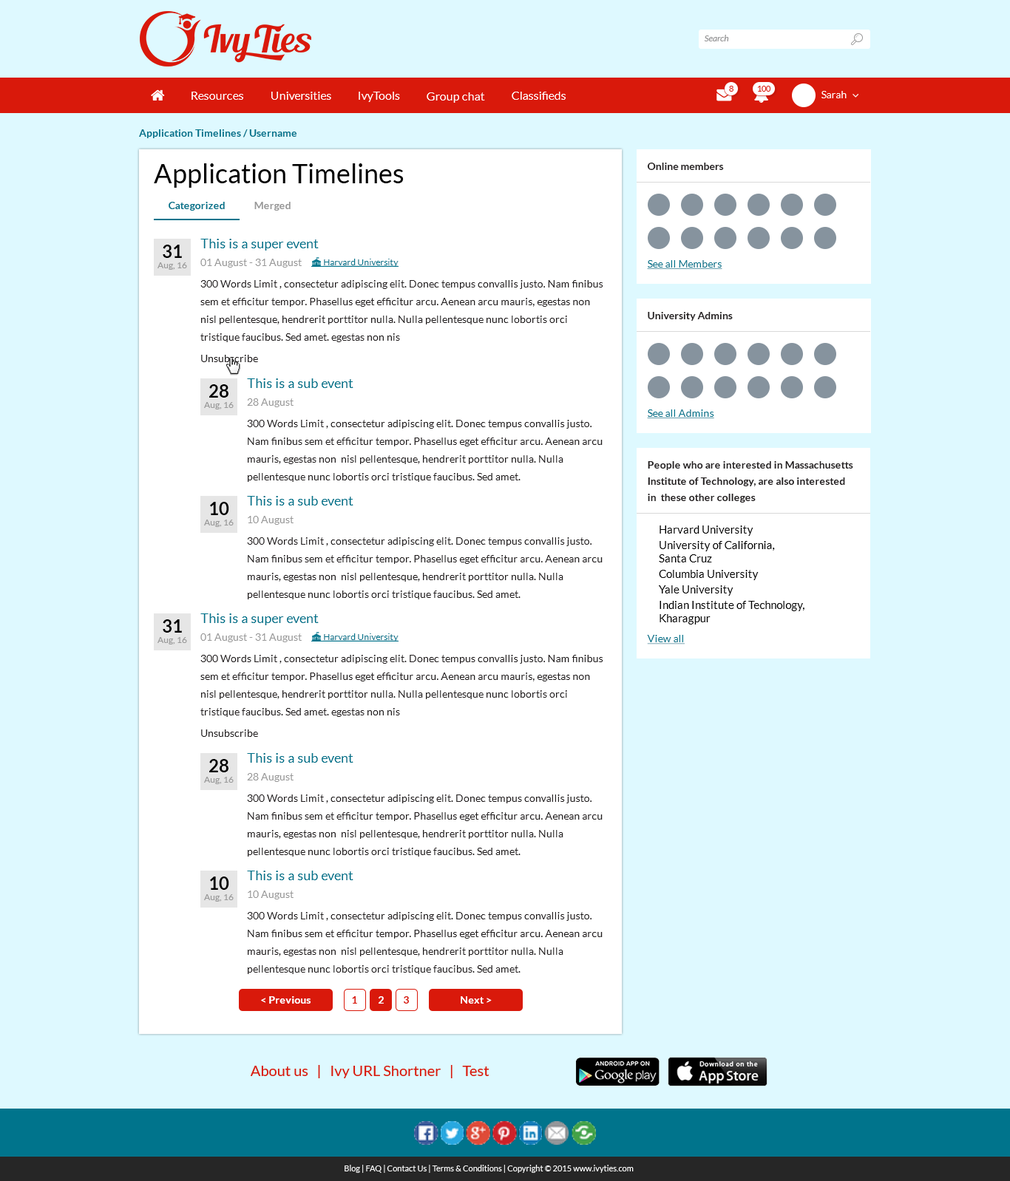
<style>
.page{position:relative;width:1010px;height:1181px;background:#def9ff}
.page>*{position:absolute;margin:0}
.t1{font:10.3px "Lato-Bold";color:#00748c}
.t2{font:26.6px "Lato-Regular";color:#000000}
.t3{font:10.3px "Lato-Bold";color:#231f20}
.t4{font:10.3px "Lato-Bold";color:#999999}
.t5{font:8.9px "Lato-Regular";color:#999999}
.t6{font:17.7px "Lato-Bold";color:#000000}
.t7{font:13.3px "Lato-Regular";color:#00748c}
.t8{font:10.3px "Lato-Regular";color:#999999}
.t9{font:8.9px "Lato-Regular";color:#00748c;text-decoration:underline}
.t10{font:10.3px "Lato-Regular";color:#00748c;text-decoration:underline}
.t11{font:10.3px/17.7px "Lato-Regular";color:#231f20}
.t12{font:10.3px "Lato-Regular";color:#231f20}
.t13{font:10.3px/16.3px "Lato-Bold";color:#231f20}
.t14{font:11.1px "Lato-Regular";color:#000000}
.t15{font:10.3px "Lato-Bold";color:#ffffff}
.t16{font:10.3px "Lato-Bold";color:#d9190b}
</style>
<div class="page">
<p class="t1" style="left:139px;top:129px;width:157px;height:9px">Application Timelines / Username</p>
<p class="t2" style="left:154px;top:163px;width:250px;height:25px">Application Timelines</p>
<p class="t3" style="left:647px;top:163px;width:77px;height:7px">Online members</p>
<p class="t1" style="left:169px;top:202px;width:56px;height:9px">Categorized</p>
<p class="t4" style="left:254px;top:202px;width:36px;height:9px">Merged</p>
<p class="t5" style="left:157px;top:245px;width:30px;height:25px;text-align:center"><span class="t6">31<br></span>Aug, 16</p>
<p class="t7" style="left:200px;top:239px;width:119px;height:12px">This is a super event</p>
<p class="t8" style="left:200px;top:259px;width:102px;height:9px">01 August - 31 August</p>
<p class="t9" style="left:323px;top:259px;width:75px;height:8px">Harvard University</p>
<p class="t10" style="left:647px;top:260px;width:75px;height:9px">See all Members</p>
<p class="t11" style="left:200px;top:280px;width:403px;height:62px">300 Words Limit , consectetur adipiscing elit. Donec tempus convallis justo. Nam finibus sem et efficitur tempor. Phasellus eget efficitur arcu. Aenean arcu mauris, egestas non  nisl pellentesque, hendrerit porttitor nulla. Nulla pellentesque nunc lobortis orci tristique faucibus. Sed amet. egestas non nis</p>
<p class="t3" style="left:647px;top:312px;width:85px;height:9px">University Admins</p>
<p class="t12" style="left:201px;top:355px;width:57px;height:7px">Unsubscribe</p>
<p class="t5" style="left:204px;top:384px;width:30px;height:25px;text-align:center"><span class="t6">28<br></span>Aug, 16</p>
<p class="t7" style="left:247px;top:378px;width:106px;height:10px">This is a sub event</p>
<p class="t8" style="left:247px;top:398px;width:46px;height:9px">28 August</p>
<p class="t10" style="left:647px;top:409px;width:67px;height:9px">See all Admins</p>
<p class="t11" style="left:247px;top:420px;width:355px;height:62px">300 Words Limit , consectetur adipiscing elit. Donec tempus convallis justo. Nam finibus sem et efficitur tempor. Phasellus eget efficitur arcu. Aenean arcu mauris, egestas non  nisl pellentesque, hendrerit porttitor nulla. Nulla pellentesque nunc lobortis orci tristique faucibus. Sed amet.<br> egestas non nis</p>
<p class="t13" style="left:647px;top:461px;width:206px;height:42px">People who are interested in Massachusetts Institute of Technology, are also interested <br>in  these other colleges</p>
<p class="t7" style="left:247px;top:496px;width:106px;height:10px">This is a sub event</p>
<p class="t5" style="left:204px;top:502px;width:30px;height:25px;text-align:center"><span class="t6">10<br></span>Aug, 16</p>
<p class="t8" style="left:248px;top:516px;width:45px;height:9px">10 August</p>
<p class="t14" style="left:659px;top:526px;width:145px;height:99px">Harvard University<br>University of California, <br>Santa Cruz<br>Columbia University<br>Yale University<br>Indian Institute of Technology, <br>Kharagpur</p>
<p class="t11" style="left:247px;top:537px;width:355px;height:62px">300 Words Limit , consectetur adipiscing elit. Donec tempus convallis justo. Nam finibus sem et efficitur tempor. Phasellus eget efficitur arcu. Aenean arcu mauris, egestas non  nisl pellentesque, hendrerit porttitor nulla. Nulla pellentesque nunc lobortis orci tristique faucibus. Sed amet.<br> egestas non nis</p>
<p class="t7" style="left:200px;top:613px;width:119px;height:12px">This is a super event</p>
<p class="t5" style="left:157px;top:619px;width:30px;height:25px;text-align:center"><span class="t6">31<br></span>Aug, 16</p>
<p class="t8" style="left:200px;top:633px;width:102px;height:9px">01 August - 31 August</p>
<p class="t9" style="left:323px;top:633px;width:75px;height:9px">Harvard University</p>
<p class="t10" style="left:647px;top:635px;width:37px;height:9px">View all</p>
<p class="t11" style="left:200px;top:655px;width:403px;height:62px">300 Words Limit , consectetur adipiscing elit. Donec tempus convallis justo. Nam finibus sem et efficitur tempor. Phasellus eget efficitur arcu. Aenean arcu mauris, egestas non  nisl pellentesque, hendrerit porttitor nulla. Nulla pellentesque nunc lobortis orci tristique faucibus. Sed amet. egestas non nis</p>
<p class="t12" style="left:201px;top:729px;width:57px;height:8px">Unsubscribe</p>
<p class="t5" style="left:204px;top:759px;width:30px;height:25px;text-align:center"><span class="t6">28<br></span>Aug, 16</p>
<p class="t7" style="left:247px;top:753px;width:106px;height:10px">This is a sub event</p>
<p class="t8" style="left:247px;top:773px;width:46px;height:9px">28 August</p>
<p class="t11" style="left:247px;top:795px;width:355px;height:62px">300 Words Limit , consectetur adipiscing elit. Donec tempus convallis justo. Nam finibus sem et efficitur tempor. Phasellus eget efficitur arcu. Aenean arcu mauris, egestas non  nisl pellentesque, hendrerit porttitor nulla. Nulla pellentesque nunc lobortis orci tristique faucibus. Sed amet.<br> egestas non nis</p>
<p class="t5" style="left:204px;top:877px;width:30px;height:25px;text-align:center"><span class="t6">10<br></span>Aug, 16</p>
<p class="t7" style="left:247px;top:871px;width:106px;height:9px">This is a sub event</p>
<p class="t8" style="left:248px;top:891px;width:45px;height:8px">10 August</p>
<p class="t11" style="left:247px;top:912px;width:355px;height:62px">300 Words Limit , consectetur adipiscing elit. Donec tempus convallis justo. Nam finibus sem et efficitur tempor. Phasellus eget efficitur arcu. Aenean arcu mauris, egestas non  nisl pellentesque, hendrerit porttitor nulla. Nulla pellentesque nunc lobortis orci tristique faucibus. Sed amet.<br> egestas non nis</p>
<p class="t15" style="left:261px;top:996px;width:49px;height:8px">&lt; Previous</p>
<p class="t16" style="left:352px;top:996px;width:5px;height:8px">1</p>
<p class="t15" style="left:378px;top:996px;width:6px;height:8px">2</p>
<p class="t16" style="left:404px;top:996px;width:5px;height:8px">3</p>
<p class="t15" style="left:460px;top:996px;width:32px;height:8px">Next &gt;</p>
</div>
